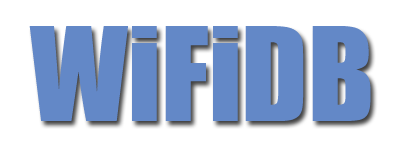
<style>
.page{position:relative;width:400px;height:150px;background:#ffffff}
.page>*{position:absolute;margin:0}
.t1{font:120px "Impact";color:#6388c7}
</style>
<div class="page">
<p class="t1" style="left:29px;top:26px;width:342px;height:95px">WiFiDB</p>
</div>
